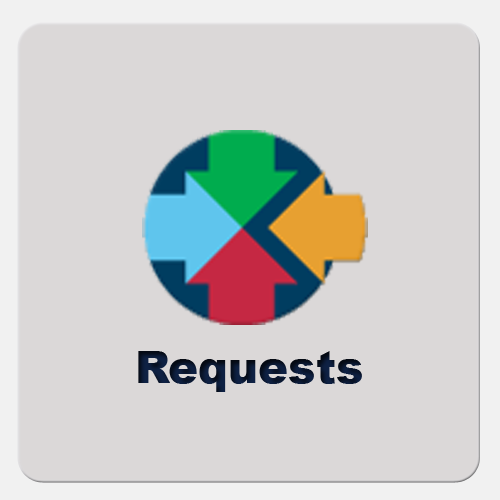
<style>
.page{position:relative;width:500px;height:500px;background:#dbd8d8}
.page>*{position:absolute;margin:0}
.t1{font:45px "Arial-Black";color:#0e2144}
</style>
<div class="page">
<p class="t1" style="left:138px;top:351px;width:224px;height:41px">Requests</p>
</div>
